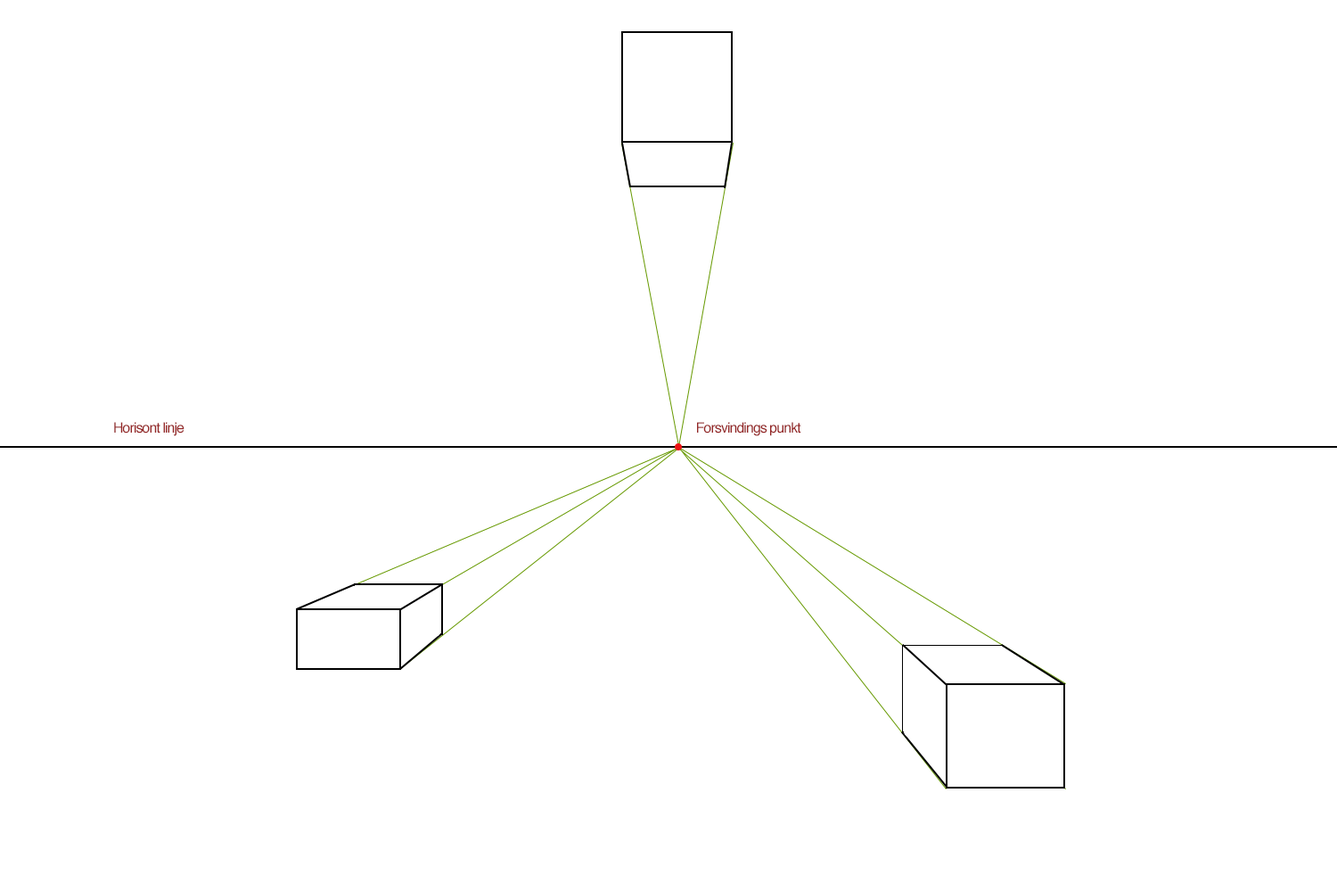
<style>
.page{position:relative;width:1337px;height:892px;background:#ffffff}
.page>*{position:absolute;margin:0}
.t1{font:14.3px "Helvetica";letter-spacing:-0.06em;color:#952727}
</style>
<div class="page">
<p class="t1" style="left:114px;top:422px;width:71px;height:14px">Horisont linje</p>
<p class="t1" style="left:697px;top:422px;width:105px;height:14px">Forsvindings punkt</p>
</div>
